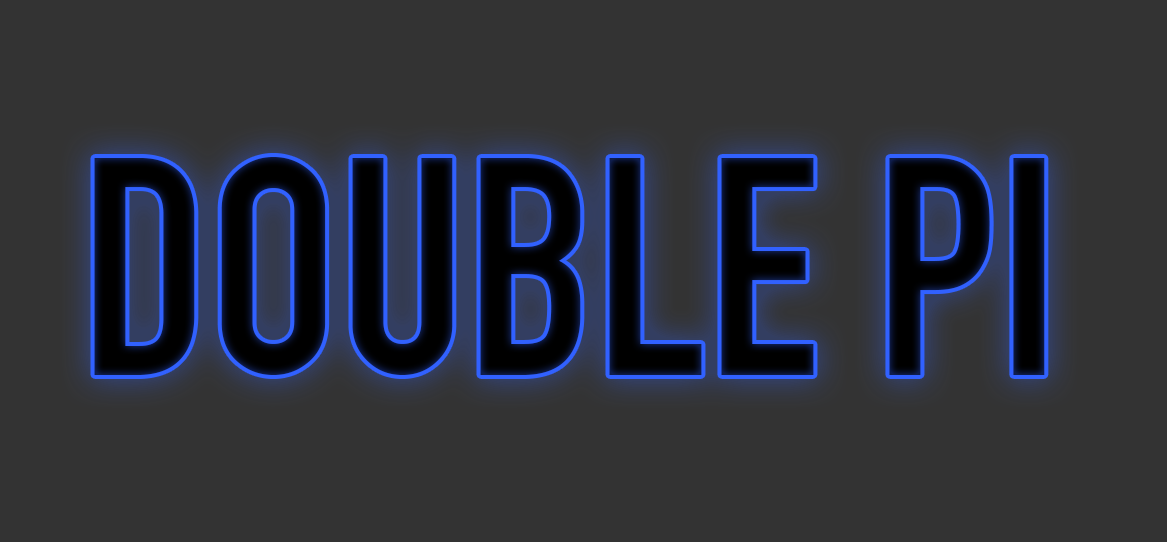
<style>
.page{position:relative;width:1167px;height:542px;background:#333333}
.page>*{position:absolute;margin:0}
.t1{font:302.5px "DINEngschrift";color:#010204}
</style>
<div class="page">
<p class="t1" style="left:94px;top:157px;width:951px;height:218px">DOUBLE PI</p>
</div>
